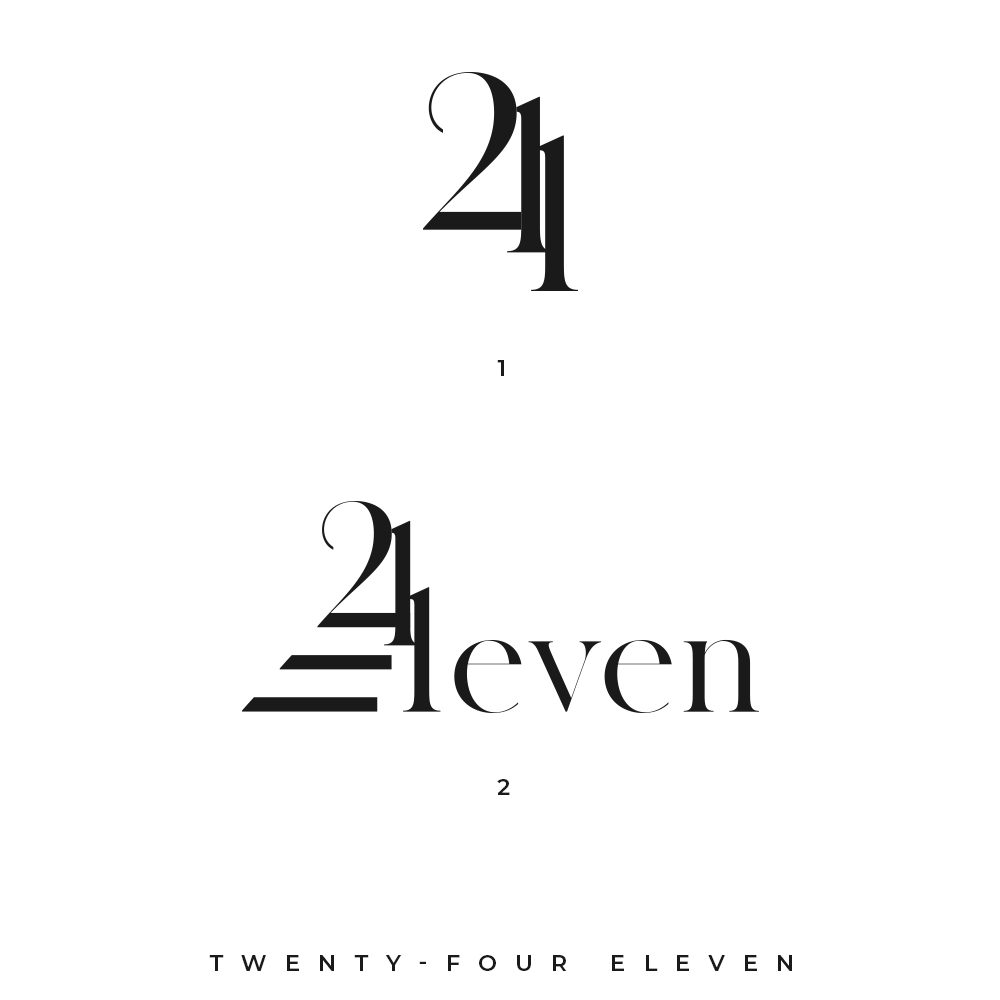
<style>
.page{position:relative;width:1000px;height:1000px;background:#ffffff}
.page>*{position:absolute;margin:0}
.t1{font:22.7px "Montserrat-SemiBold";letter-spacing:0.8em;color:#1a1a1a;text-transform:uppercase}
</style>
<div class="page">
<p class="t1" style="left:497px;top:360px;width:7px;height:16px">1</p>
<p class="t1" style="left:497px;top:779px;width:13px;height:16px">2</p>
<p class="t1" style="left:209px;top:955px;width:583px;height:16px">twenty-four eleven</p>
</div>
